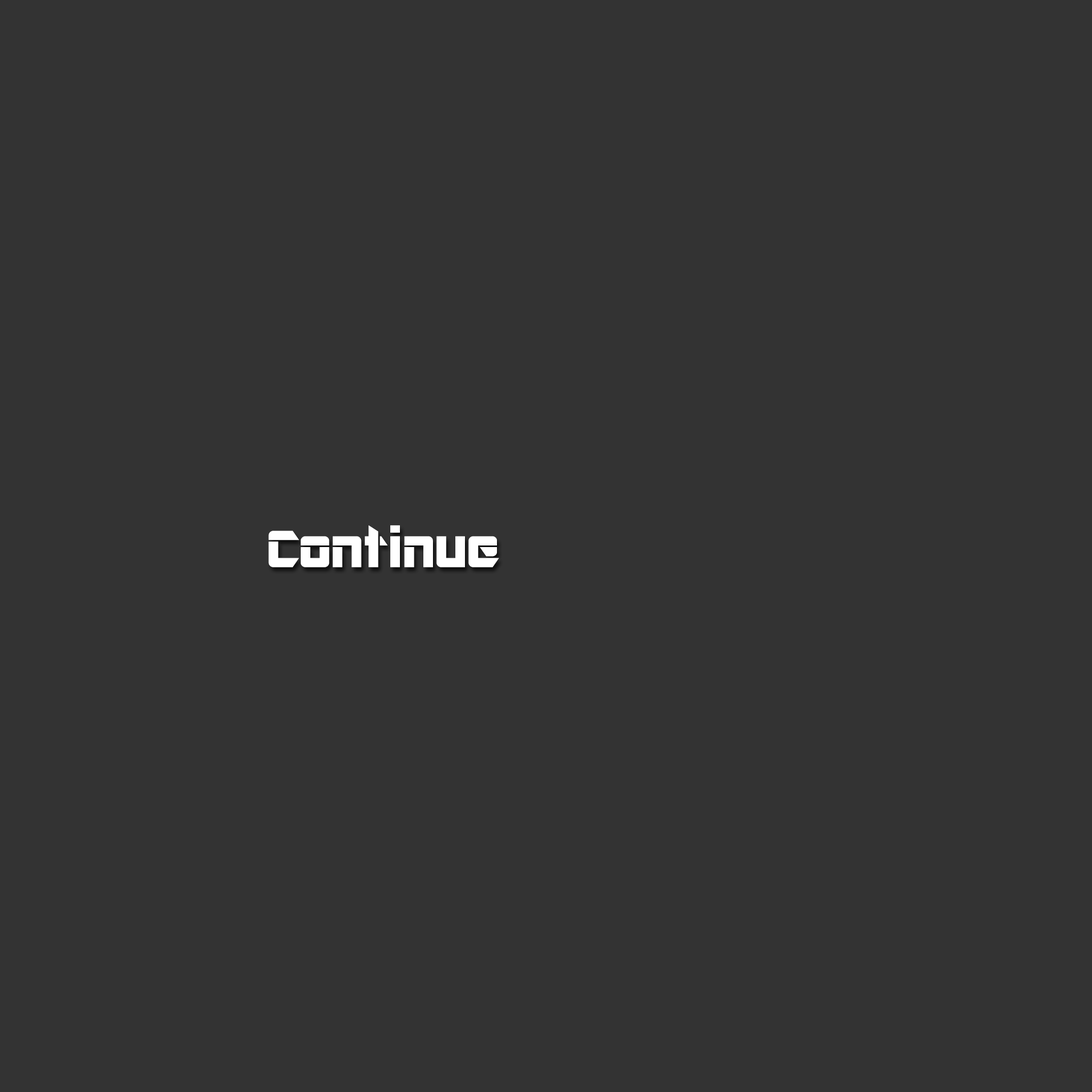
<style>
.page{position:relative;width:1092px;height:1092px;background:#333333}
.page>*{position:absolute;margin:0}
.t1{font:57.6px "ARDESTINE";color:#ffffff;scale:1.04 1}
</style>
<div class="page">
<p class="t1" style="left:268px;top:525px;width:231px;height:42px">Continue</p>
</div>
